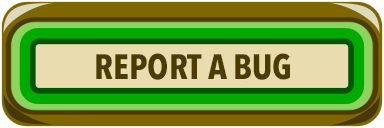
<style>
.page{position:relative;width:384px;height:128px;background:#e9ddaf}
.page>*{position:absolute;margin:0}
.t1{font:35px "AvenirNextCondensed-Bold";color:#4c3c00}
</style>
<div class="page">
<p class="t1" style="left:96px;top:53px;width:194px;height:27px">REPORT A BUG</p>
</div>
